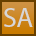
<style>
.page{position:relative;width:36px;height:36px;background:#684000}
.page>*{position:absolute;margin:0}
.t1{font:27.3px "MyriadPro-Regular";color:#d7d7d7}
</style>
<div class="page">
<p class="t1" style="left:4px;top:8px;width:29px;height:19px">SA</p>
</div>
